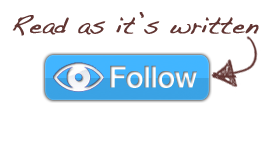
<style>
.page{position:relative;width:264px;height:144px;background:#ffffff}
.page>*{position:absolute;margin:0}
.t1{font:24px "Handwriting-Dakota";color:#613532;font-weight:bold}
.t2{font:30px "Helvetica-Bold";letter-spacing:-0.025em}
</style>
<div class="page">
<p class="t1" style="left:12px;top:12px;width:247px;height:24px">Read as it’s written</p>
<p class="t2" style="left:110px;top:65px;width:87px;height:23px">Follow</p>
</div>
